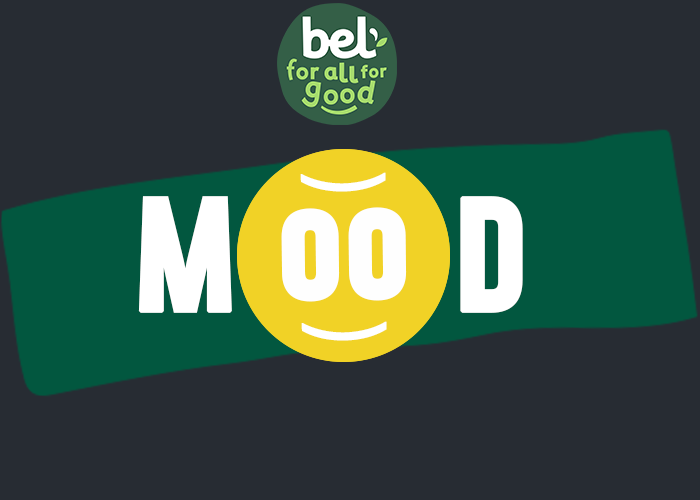
<style>
.page{position:relative;width:700px;height:500px;background:#272c33}
.page>*{position:absolute;margin:0}
.t1{font:83.3px "MVQR-Regular";color:#ffffff;font-weight:bold}
.t2{font:133.3px "MVQR-Regular";color:#ffffff;font-weight:bold}
.t3{font:133.3px "MVQR-Regular";color:#fefefe;font-weight:bold}
</style>
<div class="page">
<p class="t1" style="left:300px;top:172px;width:86px;height:20px;rotate:-91deg">(</p>
<p class="t2" style="left:138px;top:196px;width:94px;height:117px">M</p>
<p class="t2" style="left:460px;top:196px;width:63px;height:117px">D</p>
<p class="t3" style="left:281px;top:207px;width:126px;height:95px;rotate:-1deg">oo</p>
<p class="t1" style="left:301px;top:321px;width:86px;height:20px;rotate:-91deg">(</p>
</div>
